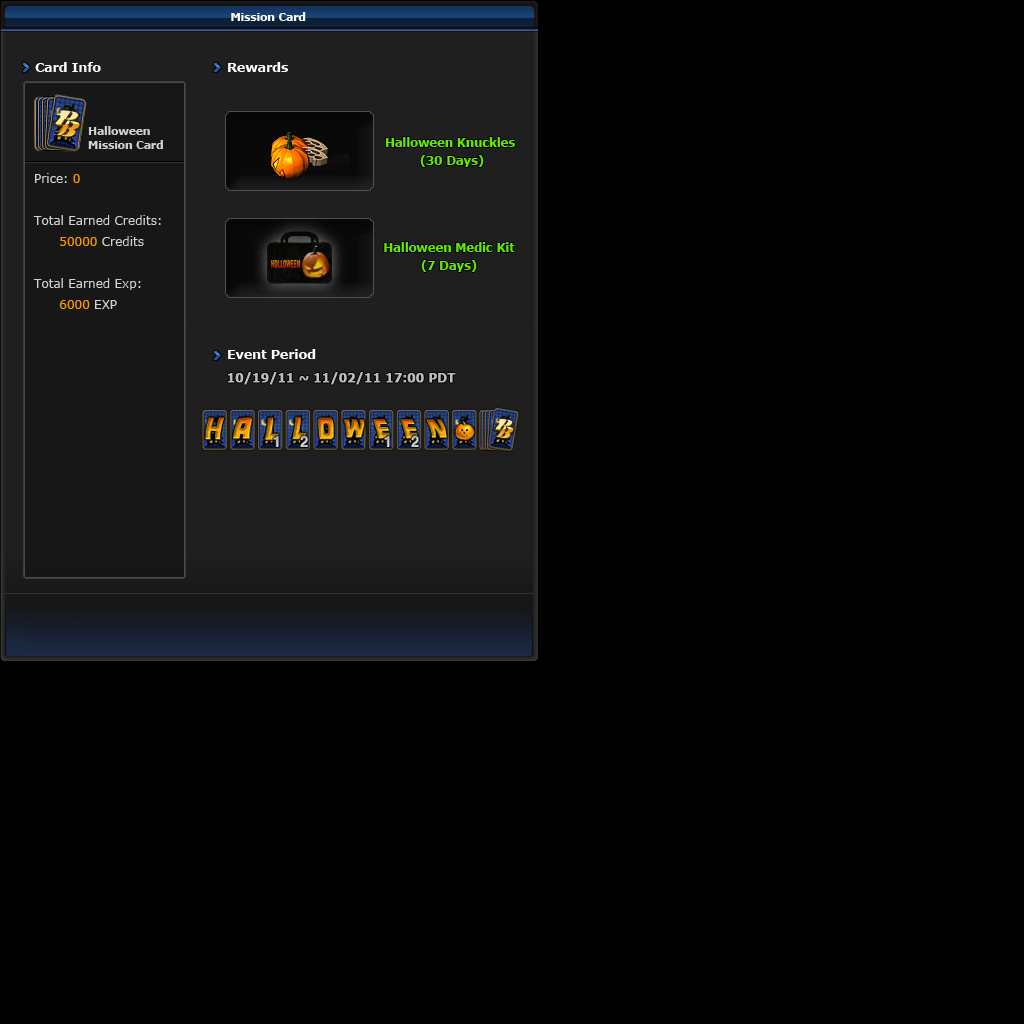
<style>
.page{position:relative;width:1024px;height:1024px;background:#000000}
.page>*{position:absolute;margin:0}
.t1{font:11px "Verdana-Bold";letter-spacing:-0.025em;color:#ffffff}
.t2{font:13px "Verdana-Bold";letter-spacing:-0.025em;color:#ffffff}
.t3{font:11px/14px "Verdana-Bold";letter-spacing:-0.025em;color:#d2d2d2}
.t4{font:12px/18px "Verdana-Bold";letter-spacing:-0.025em;color:#63e900}
.t5{font:12px "Verdana";color:#d2d2d2}
.t6{font:12px "Verdana";color:#ff9900}
.t7{font:12px "Verdana-Bold";letter-spacing:-0.025em;color:#bebdbd;font-weight:bold}
</style>
<div class="page">
<p class="t1" style="left:231px;top:12px;width:75px;height:9px">Mission Card</p>
<p class="t2" style="left:35px;top:62px;width:66px;height:10px">Card Info</p>
<p class="t2" style="left:228px;top:62px;width:60px;height:10px">Rewards</p>
<p class="t3" style="left:88px;top:126px;width:75px;height:23px">Halloween <br>Mission Card</p>
<p class="t4" style="left:386px;top:137px;width:129px;height:30px;text-align:center">Halloween Knuckles <br>(30 Days)</p>
<p class="t5" style="left:33px;top:173px;width:128px;height:136px">Price: <span class="t6">0<br><br></span>Total Earned Credits: <br><span class="t6">      50000 </span>Credits<br><br>Total Earned Exp:<br>      <span class="t6">6000</span> EXP</p>
<p class="t4" style="left:384px;top:242px;width:131px;height:30px;text-align:center">Halloween Medic Kit<br>(7 Days)</p>
<p class="t2" style="left:228px;top:349px;width:88px;height:10px">Event Period</p>
<p class="t7" style="left:228px;top:372px;width:228px;height:13px">10/19/11 ~ 11/02/11 17:00 PDT</p>
</div>
